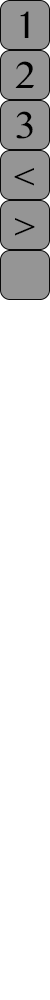
<style>
.page{position:relative;width:50px;height:1000px;background:#ffffff}
.page>*{position:absolute;margin:0}
.t1{font:33.4px "BanglaMN";color:#000000}
</style>
<div class="page">
<p class="t1" style="left:20px;top:11px;width:9px;height:27px">1</p>
<p class="t1" style="left:15px;top:61px;width:19px;height:27px">2</p>
<p class="t1" style="left:16px;top:111px;width:17px;height:28px">3</p>
<p class="t1" style="left:14px;top:168px;width:20px;height:18px">&lt;</p>
<p class="t1" style="left:15px;top:218px;width:20px;height:18px">&gt;</p>
</div>
